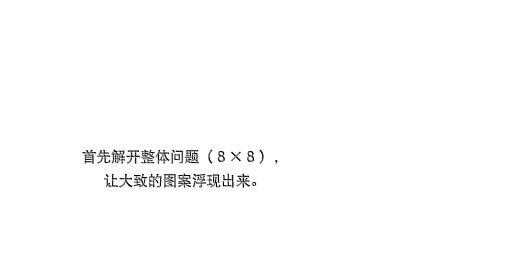
<style>
.page{position:relative;width:512px;height:256px;background:#ffffff}
.page>*{position:absolute;margin:0}
.t1{font:14.7px/24px "DFPHeiW5-GB"}
</style>
<div class="page">
<p class="t1" style="left:82px;top:149px;width:196px;height:39px;text-align:center">首先解开整体问题（８×８），<br>让大致的图案浮现出来。</p>
</div>
